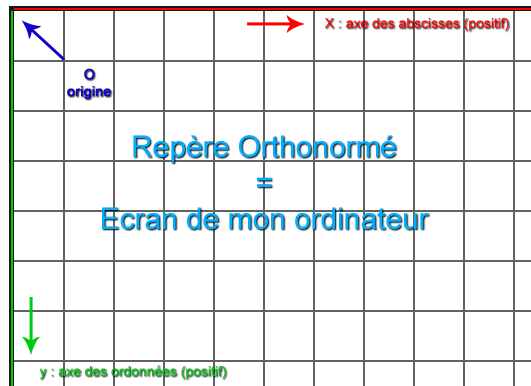
<style>
.page{position:relative;width:531px;height:386px;background:#ffffff}
.page>*{position:absolute;margin:0}
.t1{font:13.9px "ArialMT";color:#ff0000}
.t2{font:13.9px "ArialMT";color:#1300c9;font-weight:bold}
.t3{font:29.9px "ArialMT";color:#00aeff}
.t4{font:13.9px "ArialMT";color:#00c913}
</style>
<div class="page">
<p class="t1" style="left:324px;top:18px;width:185px;height:13px">X : axe des abscisses (positif)</p>
<p class="t2" style="left:67px;top:68px;width:44px;height:31px;text-align:center">O<br>origine</p>
<p class="t3" style="left:102px;top:135px;width:327px;height:95px;text-align:center">Repère Orthonormé<br>=<br>Ecran de mon ordinateur</p>
<p class="t4" style="left:39px;top:365px;width:187px;height:14px">y : axe des ordonnées (positif)</p>
</div>
